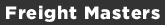
<style>
.page{position:relative;width:165px;height:25px;background:#333333}
.page>*{position:absolute;margin:0}
.t1{font:18px "Gotham-Black";letter-spacing:0.05em;color:#ffffff}
</style>
<div class="page">
<p class="t1" style="left:6px;top:5px;width:154px;height:17px">Freight Masters</p>
</div>
